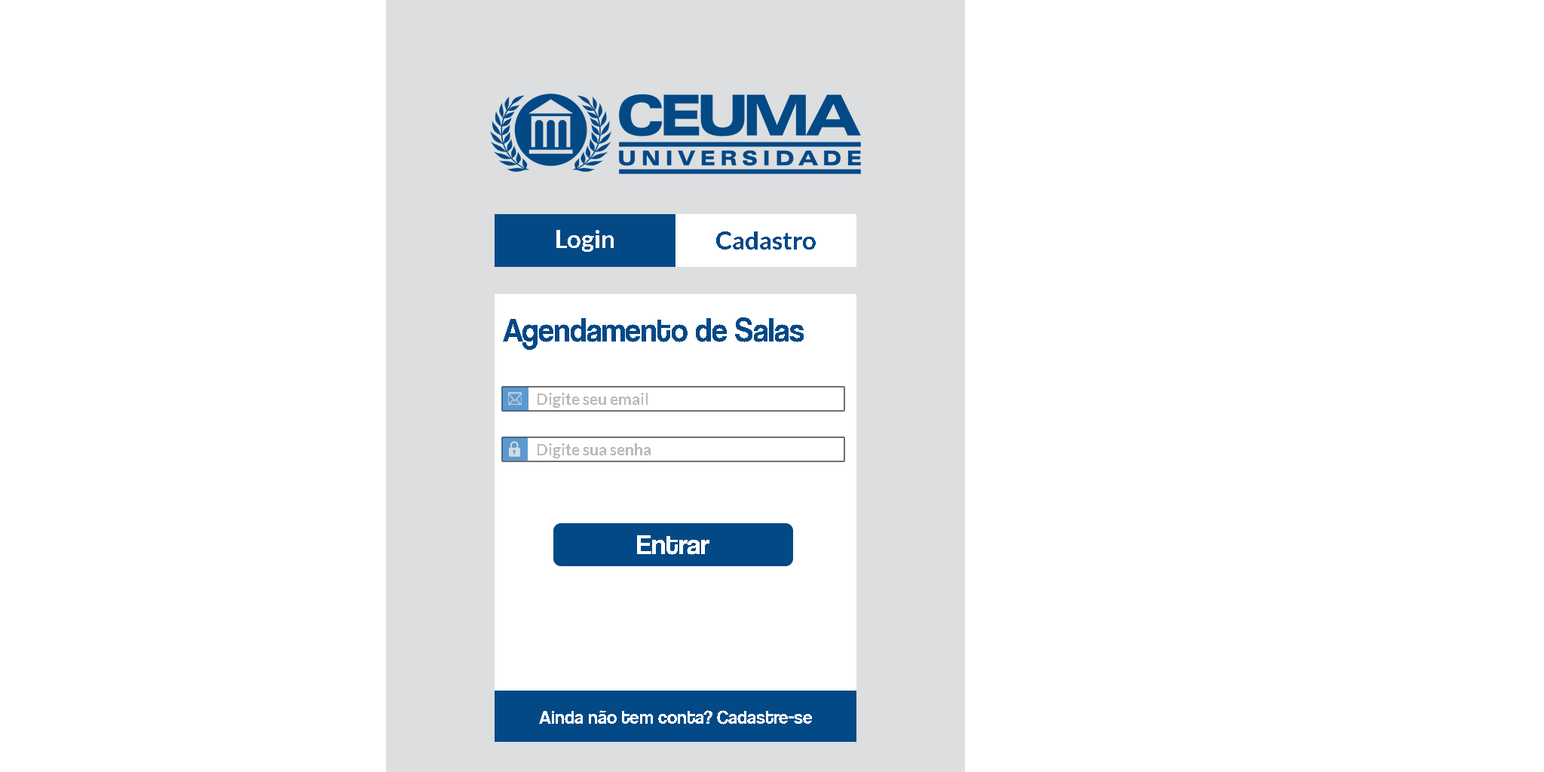
<style>
.page{position:relative;width:1544px;height:772px;background:#ffffff}
.page>*{position:absolute;margin:0}
.t1{font:25.1px "Lato-Bold";color:#ffffff}
.t2{font:25.1px "Lato-Bold";color:#034986}
.t3{font:34.3px "CoolveticaRg-Regular";color:#034986;scale:0.92 1}
.t4{font:15.7px "Lato-Bold";color:#bababa}
.t5{font:28.3px "CoolveticaRg-Regular";color:#ffffff}
.t6{font:18.9px "CoolveticaRg-Regular";color:#ffffff}
</style>
<div class="page">
<p class="t1" style="left:556px;top:230px;width:58px;height:22px">Login</p>
<p class="t2" style="left:716px;top:231px;width:100px;height:19px">Cadastro</p>
<p class="t3" style="left:503px;top:317px;width:301px;height:33px">Agendamento de Salas</p>
<p class="t4" style="left:538px;top:393px;width:110px;height:15px">Digite seu email</p>
<p class="t4" style="left:538px;top:443px;width:113px;height:15px">Digite sua senha</p>
<p class="t5" style="left:637px;top:535px;width:73px;height:20px">Entrar</p>
<p class="t6" style="left:539px;top:710px;width:273px;height:15px">Ainda não tem conta? Cadastre-se</p>
</div>
